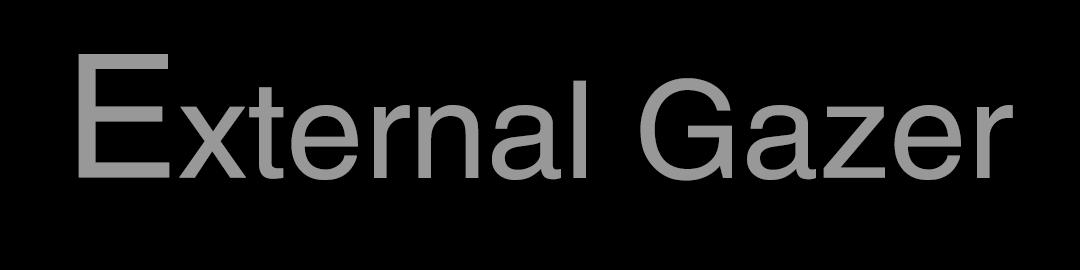
<style>
.page{position:relative;width:1080px;height:270px;background:#000000}
.page>*{position:absolute;margin:0}
.t1{font:171.6px "Helvetica";letter-spacing:0.015em;color:#989898}
.t2{font:135px "Helvetica";color:#989898;scale:1.03 1}
</style>
<div class="page">
<p class="t1" style="left:78px;top:54px;width:92px;height:124px">E</p>
<p class="t2" style="left:179px;top:78px;width:834px;height:103px">xternal Gazer</p>
</div>
